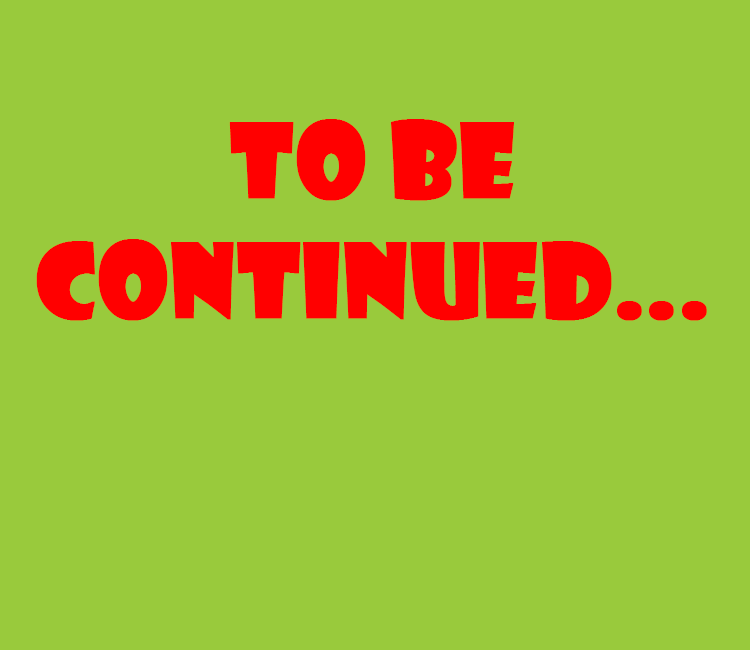
<style>
.page{position:relative;width:750px;height:650px;background:#99ca3c}
.page>*{position:absolute;margin:0}
.t1{font:100px "ShowcardGothic-Reg";color:#ff0000;font-weight:bold}
</style>
<div class="page">
<p class="t1" style="left:36px;top:119px;width:671px;height:202px;text-align:center">To be <br>Continued...</p>
</div>
